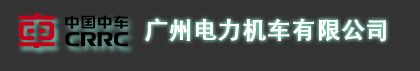
<style>
.page{position:relative;width:420px;height:71px;background:#333333}
.page>*{position:absolute;margin:0}
.t1{font:24px "AdobeHeitiStd-Regular";color:#ffffff;font-weight:bold}
</style>
<div class="page">
<p class="t1" style="left:145px;top:18px;width:241px;height:24px">广州电力机车有限公司</p>
</div>
